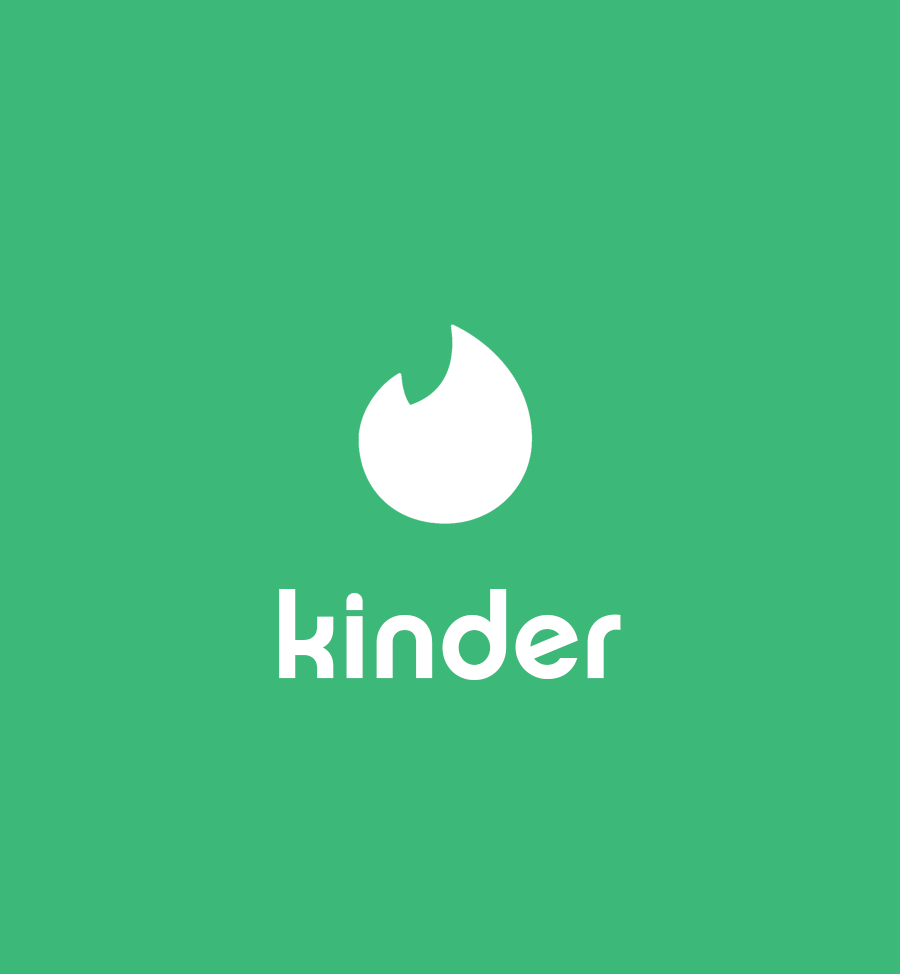
<style>
.page{position:relative;width:900px;height:974px;background:#3cb878}
.page>*{position:absolute;margin:0}
.t1{font:120px "Chalet-NewYorkNineteenSeventy";color:#ffffff}
</style>
<div class="page">
<p class="t1" style="left:279px;top:589px;width:342px;height:91px">kinder</p>
</div>
